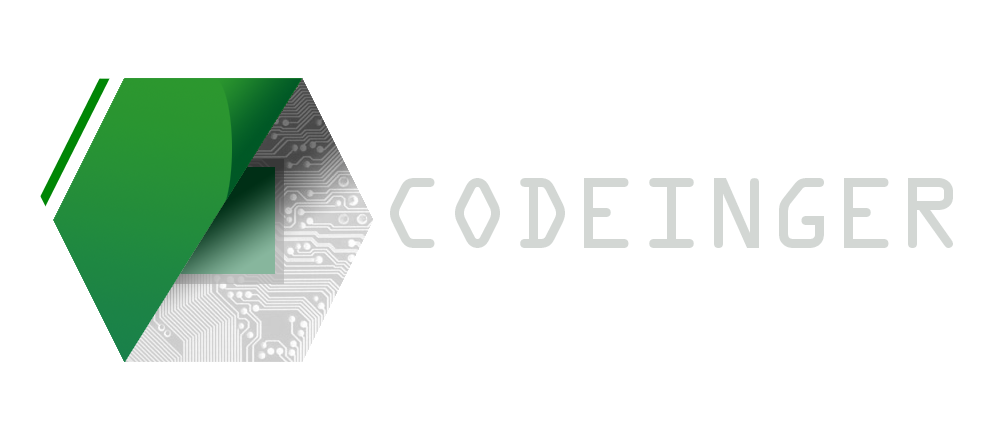
<style>
.page{position:relative;width:992px;height:443px;background:#ffffff}
.page>*{position:absolute;margin:0}
.t1{font:90px "OCRAStd";color:#d3d7d4}
</style>
<div class="page">
<p class="t1" style="left:390px;top:178px;width:563px;height:70px">CODEINGER</p>
</div>
